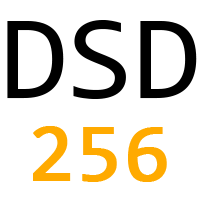
<style>
.page{position:relative;width:200px;height:200px;background:#ffffff}
.page>*{position:absolute;margin:0}
.t1{font:120.8px "Consolas";color:#000000}
.t2{font:83.3px "Consolas";color:#ffaa00;font-weight:bold}
</style>
<div class="page">
<p class="t1" style="left:7px;top:20px;width:190px;height:79px">DSD</p>
<p class="t2" style="left:33px;top:126px;width:134px;height:56px">256</p>
</div>
